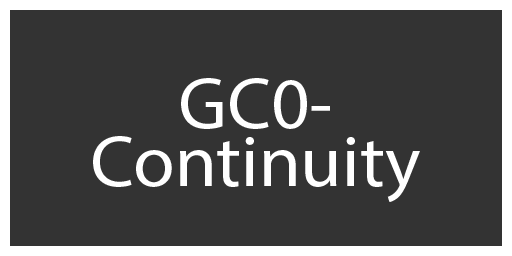
<style>
.page{position:relative;width:512px;height:256px;background:#333333}
.page>*{position:absolute;margin:0}
.t1{font:72.5px "MyriadPro-Regular";color:#ffffff;scale:1.04 1}
</style>
<div class="page">
<p class="t1" style="left:93px;top:78px;width:327px;height:124px;text-align:center">GC0-<br>Continuity</p>
</div>
